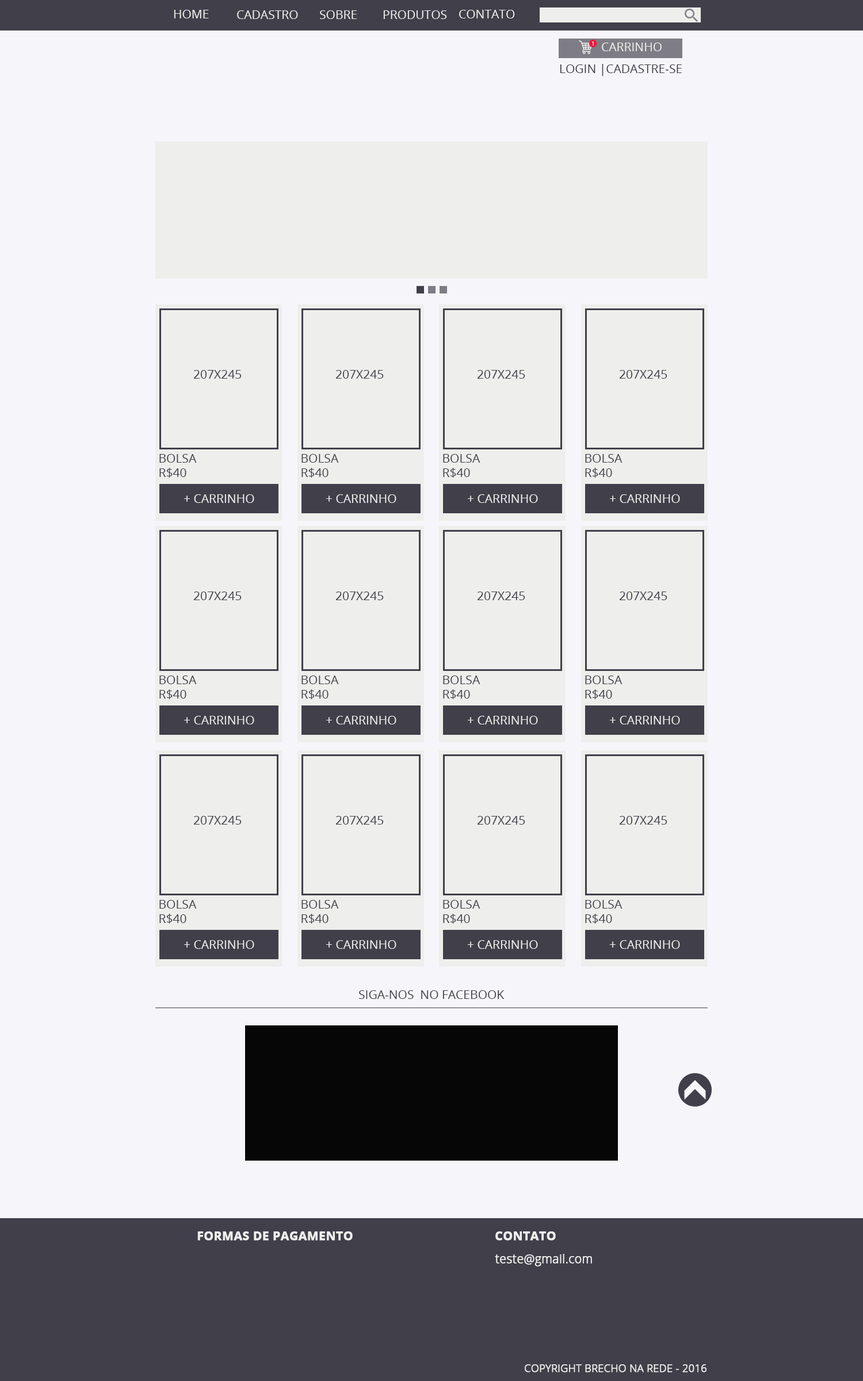
<style>
.page{position:relative;width:863px;height:1381px;background:#f6f6fa}
.page>*{position:absolute;margin:0}
.t1{font:12.1px "OpenSans";color:#eeeeec;text-transform:uppercase}
.t2{font:5.6px "OpenSans";color:#eeeeec;text-transform:uppercase;scale:1.08 1}
.t3{font:12.1px "OpenSans";color:#403f4a;text-transform:uppercase}
.t4{font:12.1px "OpenSans-Bold";color:#eeeeec;text-transform:uppercase;font-weight:bold}
.t5{font:12.1px "OpenSans-Light";color:#eeeeec;font-weight:bold}
.t6{font:10.4px "OpenSans-Light";color:#eeeeec;font-weight:bold}
</style>
<div class="page">
<p class="t1" style="left:174px;top:10px;width:35px;height:8px">Home</p>
<p class="t1" style="left:237px;top:10px;width:61px;height:9px">Cadastro</p>
<p class="t1" style="left:320px;top:10px;width:37px;height:9px">Sobre</p>
<p class="t1" style="left:383px;top:10px;width:64px;height:9px">Produtos</p>
<p class="t1" style="left:459px;top:10px;width:56px;height:8px">Contato</p>
<p class="t2" style="left:592px;top:41px;width:2px;height:5px">1</p>
<p class="t1" style="left:602px;top:43px;width:60px;height:8px">Carrinho</p>
<p class="t3" style="left:560px;top:64px;width:122px;height:12px">Login |Cadastre-se</p>
<p class="t3" style="left:193px;top:370px;width:49px;height:9px">207X245</p>
<p class="t3" style="left:336px;top:370px;width:48px;height:9px">207X245</p>
<p class="t3" style="left:477px;top:370px;width:48px;height:9px">207X245</p>
<p class="t3" style="left:619px;top:370px;width:49px;height:9px">207X245</p>
<p class="t3" style="left:159px;top:454px;width:38px;height:24px">boLsa <br>r$40</p>
<p class="t3" style="left:302px;top:454px;width:37px;height:24px">boLsa <br>r$40</p>
<p class="t3" style="left:443px;top:454px;width:38px;height:24px">boLsa <br>r$40</p>
<p class="t3" style="left:585px;top:454px;width:38px;height:24px">boLsa <br>r$40</p>
<p class="t1" style="left:184px;top:494px;width:70px;height:9px">+ carrinho</p>
<p class="t1" style="left:326px;top:494px;width:71px;height:9px">+ carrinho</p>
<p class="t1" style="left:467px;top:494px;width:71px;height:9px">+ carrinho</p>
<p class="t1" style="left:609px;top:494px;width:71px;height:9px">+ carrinho</p>
<p class="t3" style="left:193px;top:592px;width:49px;height:8px">207X245</p>
<p class="t3" style="left:336px;top:592px;width:48px;height:8px">207X245</p>
<p class="t3" style="left:477px;top:592px;width:48px;height:8px">207X245</p>
<p class="t3" style="left:619px;top:592px;width:49px;height:8px">207X245</p>
<p class="t3" style="left:159px;top:676px;width:38px;height:23px">boLsa <br>r$40</p>
<p class="t3" style="left:302px;top:676px;width:37px;height:23px">boLsa <br>r$40</p>
<p class="t3" style="left:443px;top:676px;width:38px;height:23px">boLsa <br>r$40</p>
<p class="t3" style="left:585px;top:676px;width:38px;height:23px">boLsa <br>r$40</p>
<p class="t1" style="left:184px;top:716px;width:70px;height:9px">+ carrinho</p>
<p class="t1" style="left:326px;top:716px;width:71px;height:9px">+ carrinho</p>
<p class="t1" style="left:467px;top:716px;width:71px;height:9px">+ carrinho</p>
<p class="t1" style="left:609px;top:716px;width:71px;height:9px">+ carrinho</p>
<p class="t3" style="left:193px;top:816px;width:49px;height:9px">207X245</p>
<p class="t3" style="left:336px;top:816px;width:48px;height:9px">207X245</p>
<p class="t3" style="left:477px;top:816px;width:48px;height:9px">207X245</p>
<p class="t3" style="left:619px;top:816px;width:49px;height:9px">207X245</p>
<p class="t3" style="left:159px;top:900px;width:38px;height:24px">boLsa <br>r$40</p>
<p class="t3" style="left:302px;top:900px;width:37px;height:24px">boLsa <br>r$40</p>
<p class="t3" style="left:443px;top:900px;width:38px;height:24px">boLsa <br>r$40</p>
<p class="t3" style="left:585px;top:900px;width:38px;height:24px">boLsa <br>r$40</p>
<p class="t1" style="left:184px;top:940px;width:70px;height:9px">+ carrinho</p>
<p class="t1" style="left:326px;top:940px;width:71px;height:9px">+ carrinho</p>
<p class="t1" style="left:467px;top:940px;width:71px;height:9px">+ carrinho</p>
<p class="t1" style="left:609px;top:940px;width:71px;height:9px">+ carrinho</p>
<p class="t3" style="left:359px;top:990px;width:145px;height:9px">siga-nos  no facebook</p>
<p class="t4" style="left:197px;top:1232px;width:156px;height:9px">formas de pagamento</p>
<p class="t4" style="left:496px;top:1232px;width:60px;height:9px">contATO</p>
<p class="t5" style="left:495px;top:1254px;width:97px;height:13px">teste@gmail.com</p>
<p class="t6" style="left:525px;top:1365px;width:182px;height:8px">COPYRIGHT BRECHO NA REDE - 2016</p>
</div>
